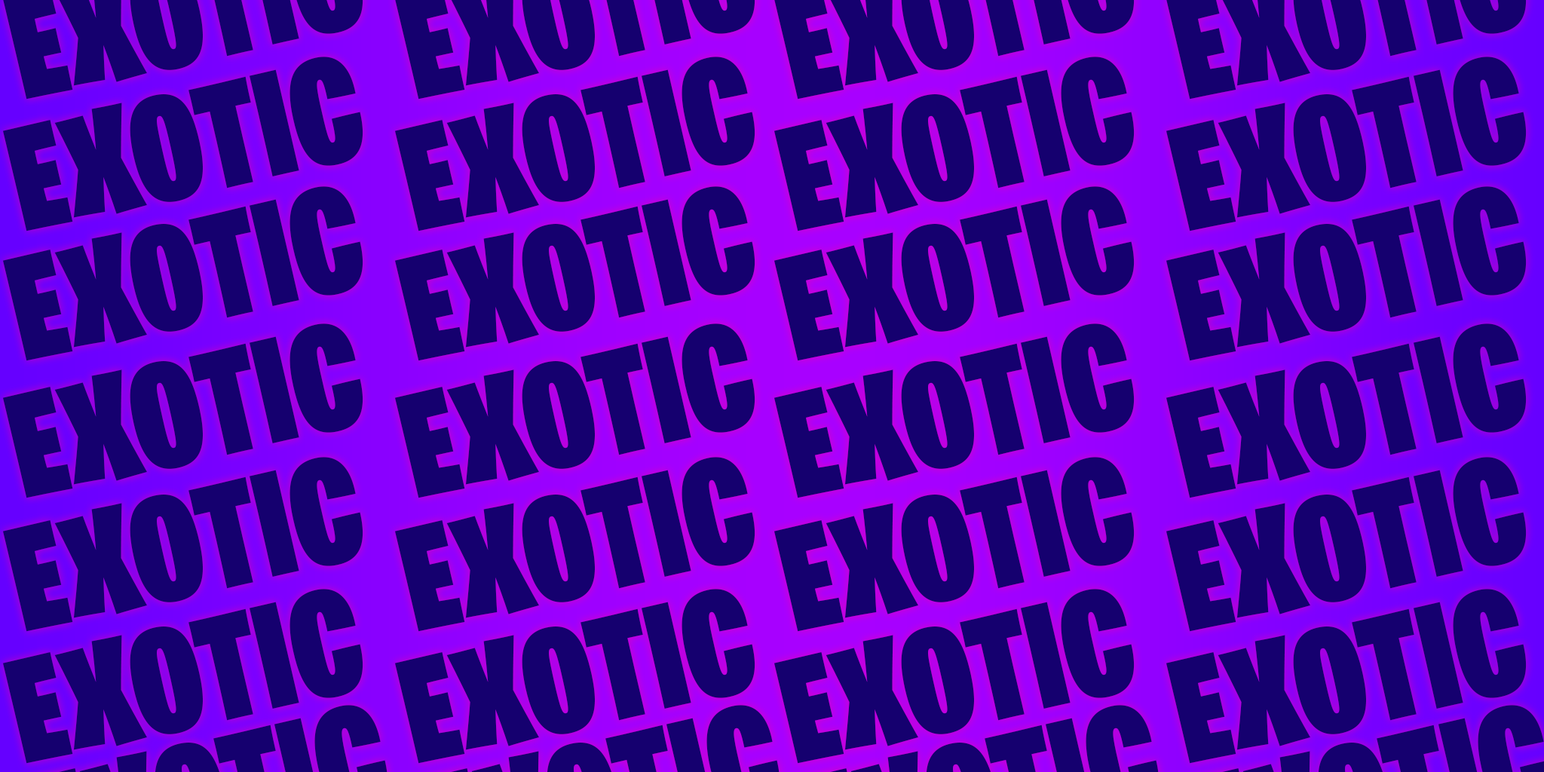
<style>
.page{position:relative;width:1544px;height:772px;background:#15006f}
.page>*{position:absolute;margin:0}
.t1{font:148.4px "BurbankBigCondensed-Black";color:#15006f}
</style>
<div class="page">
<p class="t1" style="left:2px;top:57px;width:361px;height:174px;rotate:-13deg">EXOTIC</p>
<p class="t1" style="left:394px;top:57px;width:362px;height:174px;rotate:-13deg">EXOTIC</p>
<p class="t1" style="left:774px;top:57px;width:361px;height:174px;rotate:-13deg">EXOTIC</p>
<p class="t1" style="left:1166px;top:57px;width:361px;height:174px;rotate:-13deg">EXOTIC</p>
<p class="t1" style="left:2px;top:186px;width:361px;height:175px;rotate:-13deg">EXOTIC</p>
<p class="t1" style="left:394px;top:186px;width:362px;height:175px;rotate:-13deg">EXOTIC</p>
<p class="t1" style="left:774px;top:186px;width:361px;height:175px;rotate:-13deg">EXOTIC</p>
<p class="t1" style="left:1166px;top:186px;width:361px;height:175px;rotate:-13deg">EXOTIC</p>
<p class="t1" style="left:2px;top:323px;width:361px;height:175px;rotate:-13deg">EXOTIC</p>
<p class="t1" style="left:394px;top:323px;width:362px;height:175px;rotate:-13deg">EXOTIC</p>
<p class="t1" style="left:774px;top:323px;width:361px;height:175px;rotate:-13deg">EXOTIC</p>
<p class="t1" style="left:1166px;top:323px;width:361px;height:175px;rotate:-13deg">EXOTIC</p>
<p class="t1" style="left:2px;top:457px;width:361px;height:175px;rotate:-13deg">EXOTIC</p>
<p class="t1" style="left:394px;top:457px;width:362px;height:175px;rotate:-13deg">EXOTIC</p>
<p class="t1" style="left:774px;top:457px;width:361px;height:175px;rotate:-13deg">EXOTIC</p>
<p class="t1" style="left:1166px;top:457px;width:361px;height:175px;rotate:-13deg">EXOTIC</p>
<p class="t1" style="left:2px;top:589px;width:361px;height:175px;rotate:-13deg">EXOTIC</p>
<p class="t1" style="left:394px;top:589px;width:362px;height:175px;rotate:-13deg">EXOTIC</p>
<p class="t1" style="left:774px;top:589px;width:361px;height:175px;rotate:-13deg">EXOTIC</p>
<p class="t1" style="left:1166px;top:589px;width:361px;height:175px;rotate:-13deg">EXOTIC</p>
</div>
